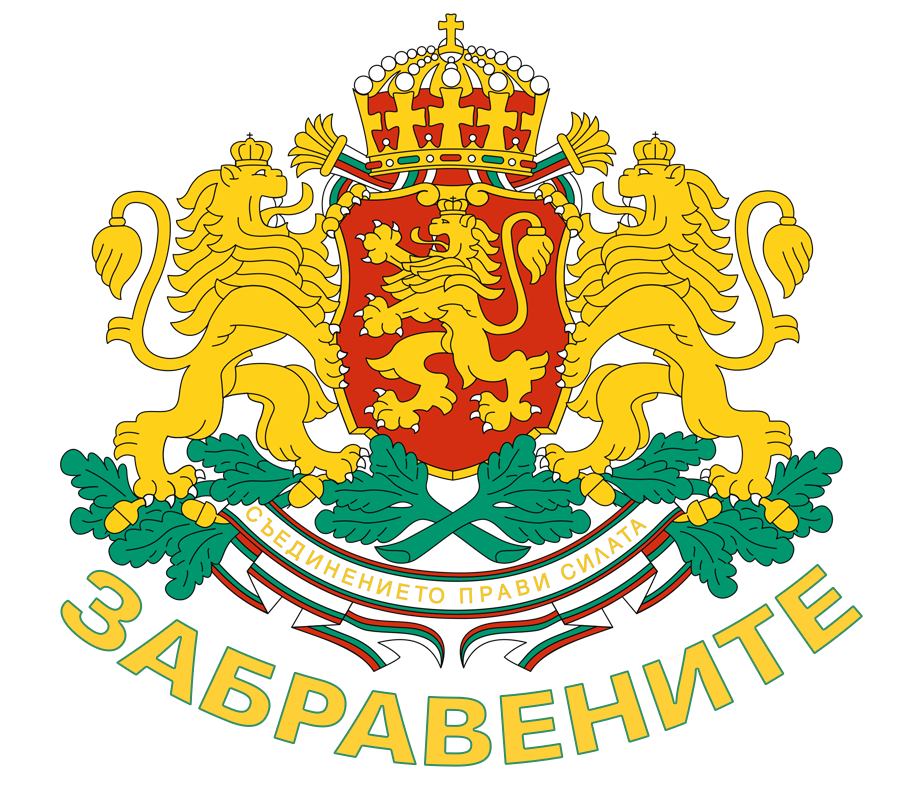
<style>
.page{position:relative;width:920px;height:790px;background:#ffffff}
.page>*{position:absolute;margin:0}
.t1{font:106.7px "SofiaSans-Black";color:#ffcf38}
</style>
<div class="page">
<p class="t1" style="left:60px;top:563px;width:803px;height:204px">ЗАБРАВЕНИТЕ</p>
</div>
